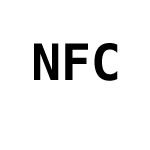
<style>
.page{position:relative;width:150px;height:150px;background:#ffffff}
.page>*{position:absolute;margin:0}
.t1{font:50px "Menlo-Bold";letter-spacing:-0.005em;color:#000000}
</style>
<div class="page">
<p class="t1" style="left:34px;top:43px;width:84px;height:38px">NFC</p>
</div>
